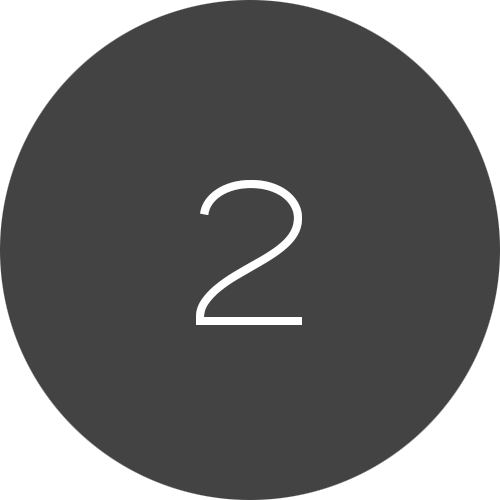
<style>
.page{position:relative;width:500px;height:500px;background:#434343}
.page>*{position:absolute;margin:0}
.t1{font:200px "Dual-300";color:#ffffff;text-transform:uppercase}
</style>
<div class="page">
<p class="t1" style="left:196px;top:180px;width:106px;height:145px">2</p>
</div>
